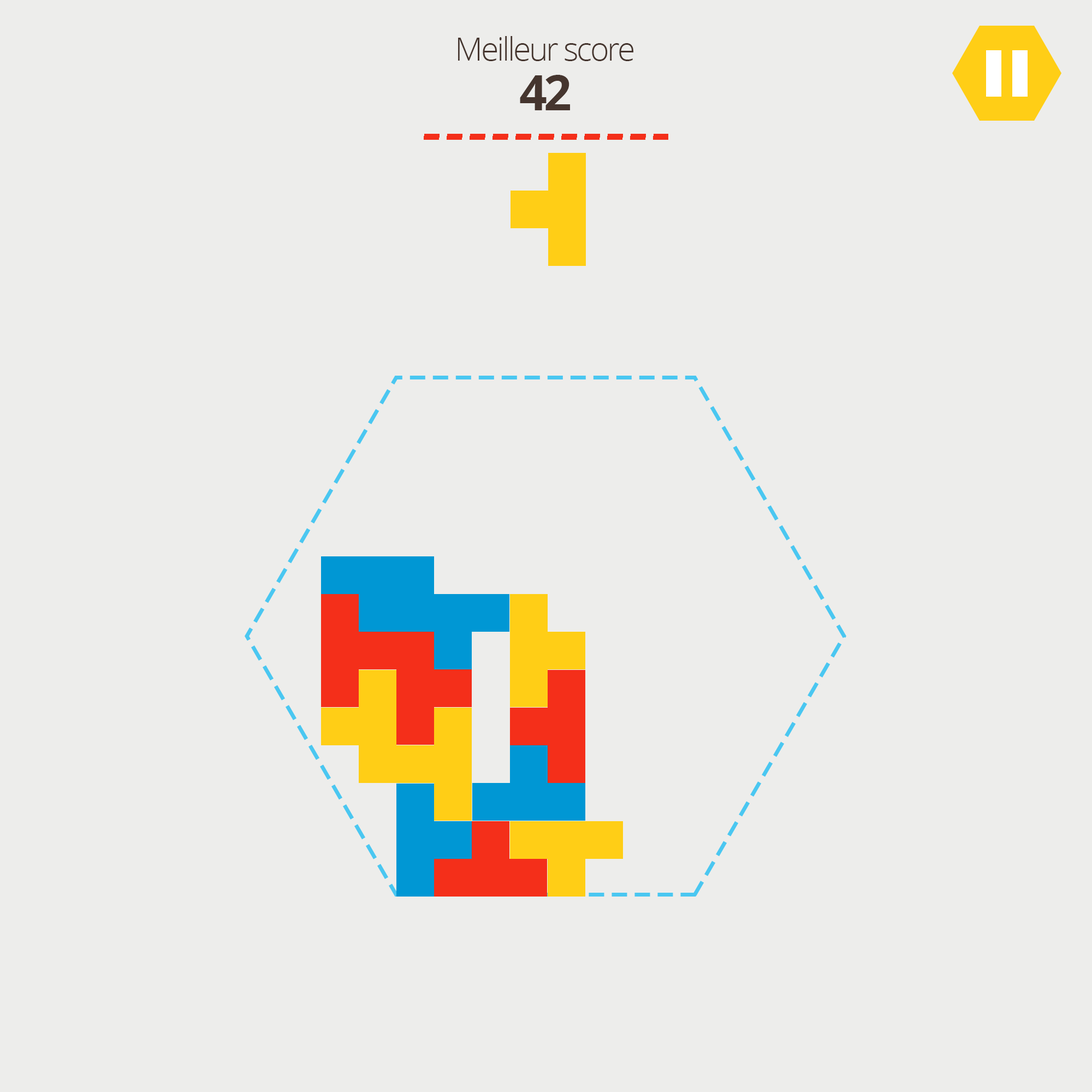
<style>
.page{position:relative;width:1092px;height:1092px;background:#ededeb}
.page>*{position:absolute;margin:0}
.t1{font:32.5px/33.2px "OpenSans-Light";letter-spacing:-0.06em;color:#45352e}
.t2{font:48.6px/49.6px "OpenSans-Bold";letter-spacing:-0.06em;color:#45352e}
</style>
<div class="page">
<p class="t1" style="left:458px;top:36px;width:175px;height:74px;text-align:center">Meilleur score<br><span class="t2">42</span></p>
</div>
